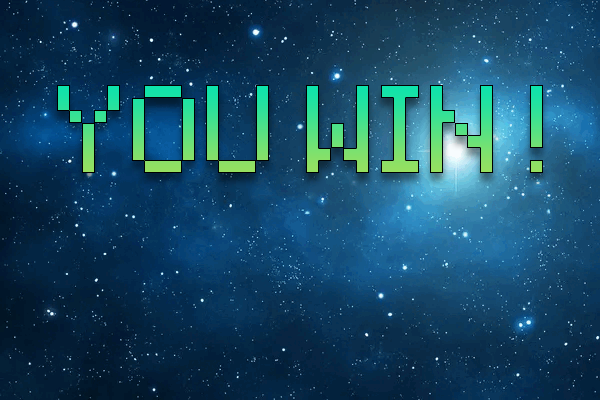
<style>
.page{position:relative;width:600px;height:400px}
.page>*{position:absolute;margin:0}
.t1{font:99.6px "Space-Invaders"}
</style>
<div class="page">
<p class="t1" style="left:57px;top:85px;width:486px;height:88px">You win !</p>
</div>
